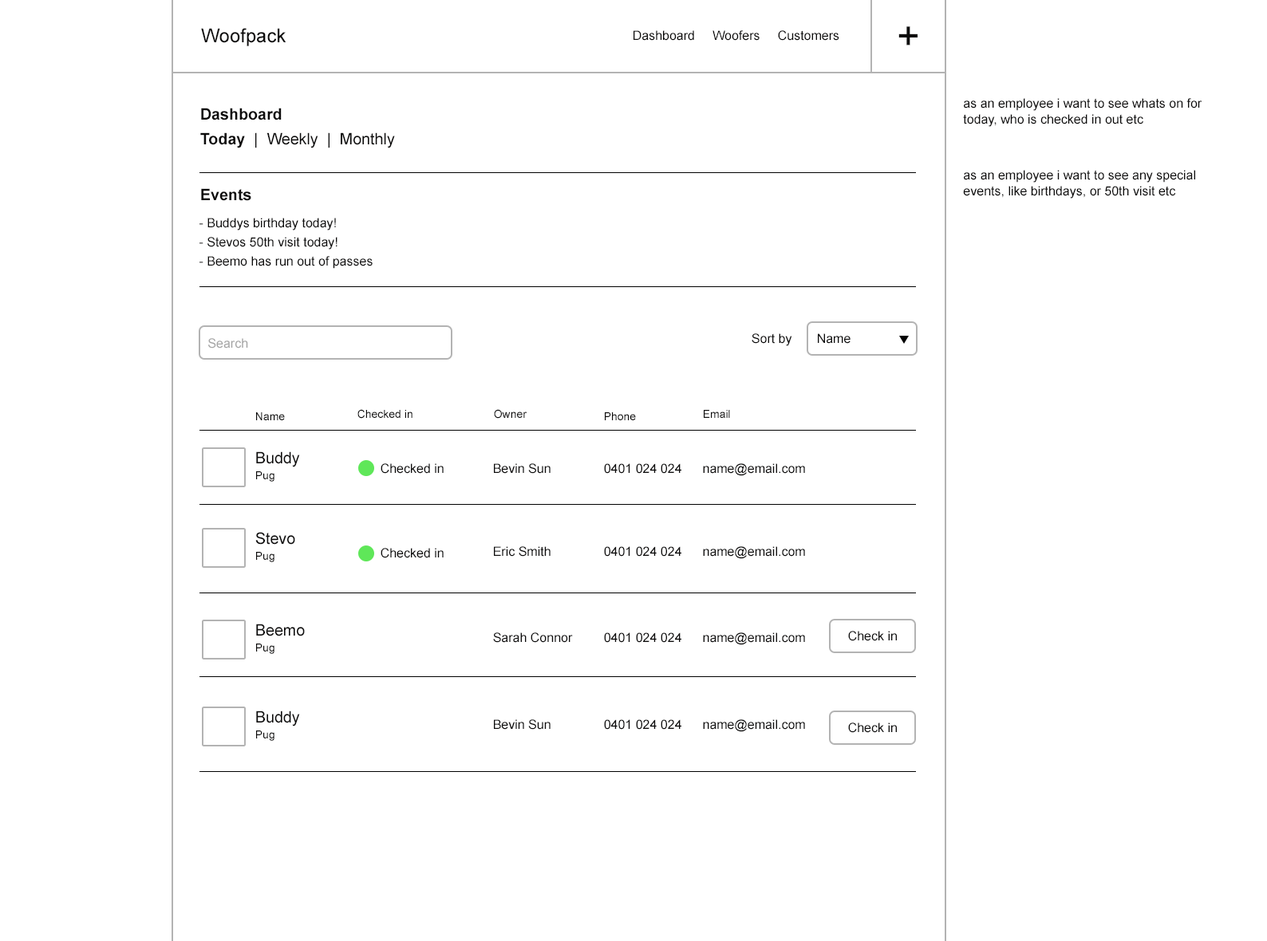
<style>
.page{position:relative;width:1267px;height:941px;background:#ffffff}
.page>*{position:absolute;margin:0}
.t1{font:19.1px "ArialMT";color:#0c0b0b}
.t2{font:39px "ArialMT";color:#0c0b0b}
.t3{font:12.8px "ArialMT";color:#0c0b0b}
.t4{font:12.8px/16px "ArialMT";color:#0c0b0b}
.t5{font:15.7px "Arial-BoldMT";color:#0c0b0b}
.t6{font:15.7px "ArialMT";color:#0c0b0b}
.t7{font:12.8px/19.1px "ArialMT";color:#0c0b0b}
.t8{font:12.8px "ArialMT";color:#a5a5a5}
.t9{font:11.2px "ArialMT";color:#0c0b0b}
</style>
<div class="page">
<p class="t1" style="left:201px;top:28px;width:85px;height:18px">Woofpack</p>
<p class="t2" style="left:898px;top:26px;width:19px;height:19px">+</p>
<p class="t3" style="left:633px;top:30px;width:206px;height:11px">Dashboard     Woofers     Customers</p>
<p class="t4" style="left:963px;top:98px;width:239px;height:29px">as an employee i want to see whats on for today, who is checked in out etc</p>
<p class="t5" style="left:201px;top:108px;width:81px;height:12px">Dashboard</p>
<p class="t6" style="left:200px;top:132px;width:195px;height:16px"><span class="t5">Today </span> |  Weekly  |  Monthly</p>
<p class="t4" style="left:963px;top:170px;width:232px;height:29px">as an employee i want to see any special events, like birthdays, or 50th visit etc</p>
<p class="t5" style="left:201px;top:188px;width:50px;height:13px">Events</p>
<p class="t7" style="left:199px;top:218px;width:174px;height:51px">- Buddys birthday today!<br>- Stevos 50th visit today!<br>- Beemo has run out of passes</p>
<p class="t8" style="left:208px;top:338px;width:40px;height:11px">Search</p>
<p class="t3" style="left:751px;top:333px;width:41px;height:13px">Sort by</p>
<p class="t3" style="left:818px;top:333px;width:32px;height:11px">Name</p>
<p class="t9" style="left:256px;top:412px;width:29px;height:8px">Name</p>
<p class="t9" style="left:357px;top:409px;width:55px;height:10px">Checked in</p>
<p class="t9" style="left:494px;top:409px;width:33px;height:10px">Owner</p>
<p class="t9" style="left:605px;top:412px;width:31px;height:8px">Phone</p>
<p class="t9" style="left:704px;top:410px;width:26px;height:8px">Email</p>
<p class="t6" style="left:256px;top:452px;width:44px;height:15px">Buddy</p>
<p class="t9" style="left:256px;top:471px;width:18px;height:11px">Pug</p>
<p class="t3" style="left:381px;top:463px;width:63px;height:11px">Checked in</p>
<p class="t3" style="left:494px;top:463px;width:56px;height:11px">Bevin Sun</p>
<p class="t3" style="left:604px;top:463px;width:77px;height:11px">0401 024 024</p>
<p class="t3" style="left:703px;top:463px;width:102px;height:13px">name@email.com</p>
<p class="t6" style="left:255px;top:532px;width:40px;height:13px">Stevo</p>
<p class="t9" style="left:256px;top:552px;width:18px;height:10px">Pug</p>
<p class="t3" style="left:381px;top:548px;width:63px;height:10px">Checked in</p>
<p class="t3" style="left:494px;top:546px;width:56px;height:11px">Eric Smith</p>
<p class="t3" style="left:604px;top:546px;width:77px;height:11px">0401 024 024</p>
<p class="t3" style="left:703px;top:546px;width:102px;height:13px">name@email.com</p>
<p class="t6" style="left:256px;top:624px;width:49px;height:13px">Beemo</p>
<p class="t3" style="left:493px;top:633px;width:80px;height:10px">Sarah Connor</p>
<p class="t3" style="left:604px;top:633px;width:77px;height:10px">0401 024 024</p>
<p class="t3" style="left:703px;top:633px;width:102px;height:12px">name@email.com</p>
<p class="t3" style="left:848px;top:631px;width:49px;height:10px">Check in</p>
<p class="t9" style="left:256px;top:644px;width:18px;height:10px">Pug</p>
<p class="t6" style="left:256px;top:711px;width:44px;height:16px">Buddy</p>
<p class="t3" style="left:494px;top:720px;width:56px;height:10px">Bevin Sun</p>
<p class="t3" style="left:604px;top:720px;width:77px;height:10px">0401 024 024</p>
<p class="t3" style="left:703px;top:720px;width:102px;height:12px">name@email.com</p>
<p class="t3" style="left:848px;top:723px;width:49px;height:10px">Check in</p>
<p class="t9" style="left:256px;top:731px;width:18px;height:10px">Pug</p>
</div>
